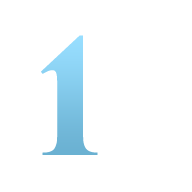
<style>
.page{position:relative;width:192px;height:192px;background:#ffffff}
.page>*{position:absolute;margin:0}
.t1{font:164.4px "PerpetuaTitlingMT-Bold";color:#7fc5e6}
</style>
<div class="page">
<p class="t1" style="left:41px;top:35px;width:57px;height:120px">1</p>
</div>
